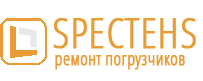
<style>
.page{position:relative;width:203px;height:81px;background:#ffffff}
.page>*{position:absolute;margin:0}
.t1{font:42px "OpenSans-CondensedLight";color:#e99c36;font-weight:bold}
.t2{font:18px "OpenSans-CondensedLight";color:#e99c36;font-weight:bold}
</style>
<div class="page">
<p class="t1" style="left:53px;top:18px;width:143px;height:31px">SPECTEHS</p>
<p class="t2" style="left:55px;top:55px;width:130px;height:15px">ремонт погрузчиков</p>
</div>
